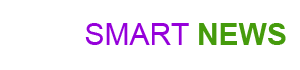
<style>
.page{position:relative;width:300px;height:70px;background:#ffffff}
.page>*{position:absolute;margin:0}
.t1{font:30px "ArialMT";color:#9500da}
.t2{font:30px "Arial-BoldMT";color:#459b0c}
</style>
<div class="page">
<p class="t1" style="left:85px;top:23px;width:201px;height:22px">SMART <span class="t2">NEWS</span></p>
</div>
